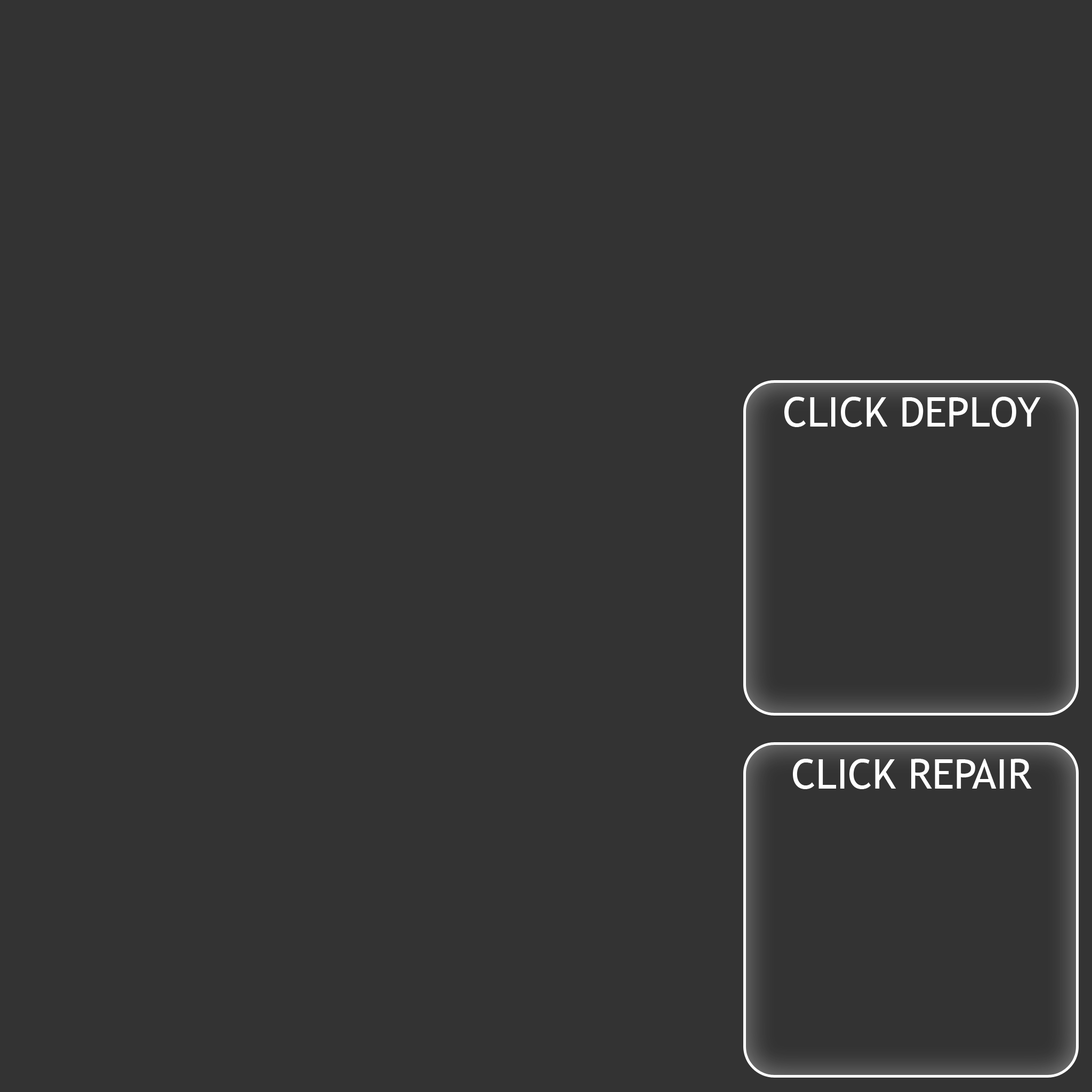
<style>
.page{position:relative;width:1092px;height:1092px;background:#333333}
.page>*{position:absolute;margin:0}
.t1{font:40.9px "TrebuchetMS";color:#ffffff}
</style>
<div class="page">
<p class="t1" style="left:784px;top:397px;width:257px;height:30px">CLICK DEPLOY</p>
<p class="t1" style="left:793px;top:759px;width:239px;height:30px">CLICK REPAIR</p>
</div>
